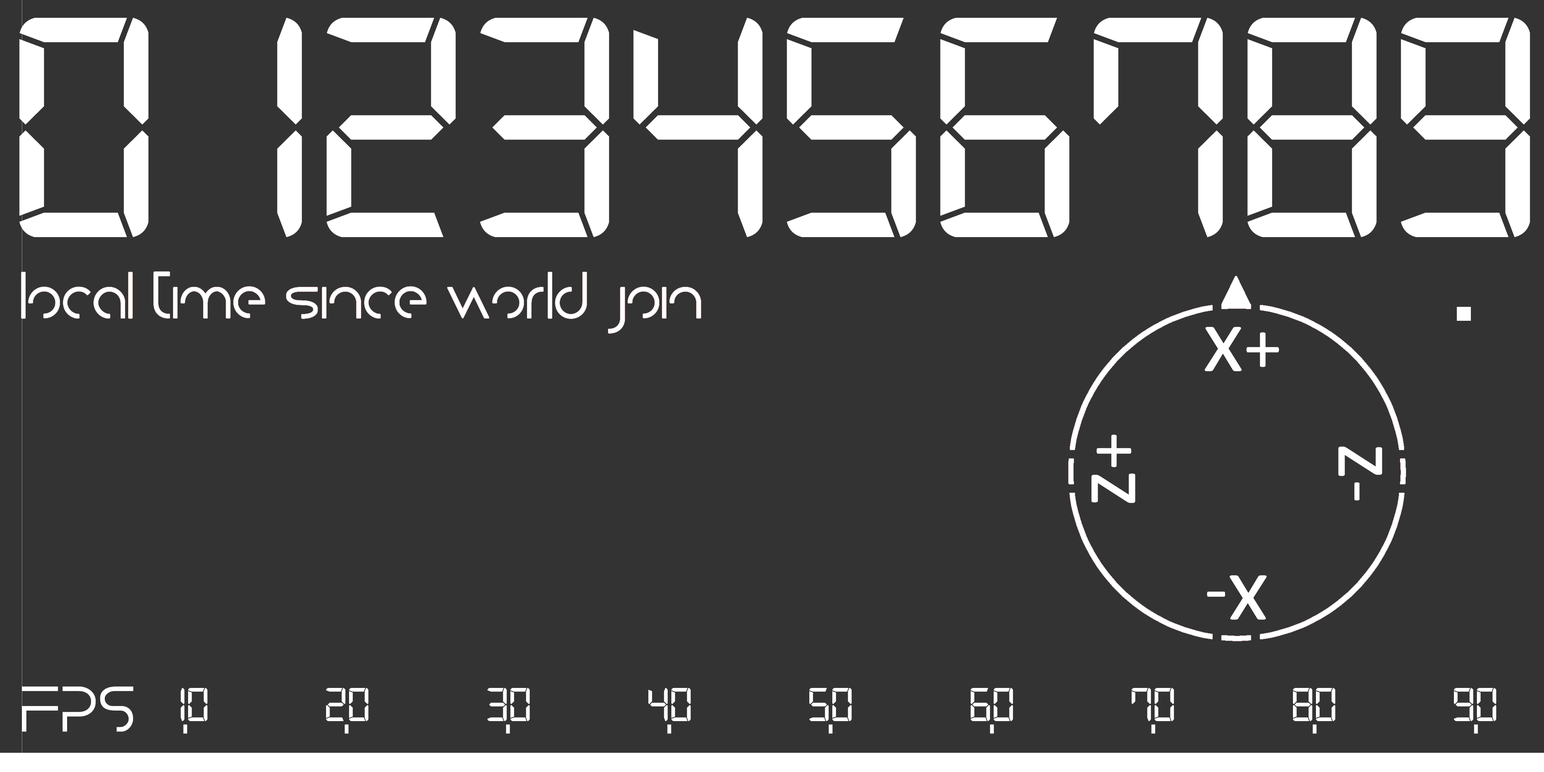
<style>
.page{position:relative;width:1544px;height:772px;background:#333333}
.page>*{position:absolute;margin:0}
.t1{font:335.1px "Digital-7Mono";color:#ffffff}
.t2{font:60.3px "Dissolvelight";color:#ffffff}
.t3{font:191.7px "Digital-7Mono";color:#ffffff}
.t4{font:94.3px "Calibri";color:#ffffff}
.t5{font:75.4px "Calibri";color:#ffffff}
.t6{font:60.3px "DissolveRegular";color:#ffffff}
.t7{font:50.6px "Digital-7Mono";color:#ffffff}
</style>
<div class="page">
<p class="t1" style="left:19px;top:18px;width:1511px;height:219px">0123456789</p>
<p class="t2" style="left:22px;top:272px;width:679px;height:61px">local time since world join</p>
<p class="t3" style="left:1457px;top:307px;width:14px;height:14px">.</p>
<p class="t4" style="left:1205px;top:327px;width:74px;height:44px">x<span class="t5">+</span></p>
<p class="t4" style="left:1091px;top:435px;width:45px;height:68px;rotate:-90deg">z<span class="t5">+</span></p>
<p class="t4" style="left:1338px;top:446px;width:45px;height:55px;rotate:90deg">z<span class="t5">-</span></p>
<p class="t4" style="left:1207px;top:575px;width:60px;height:45px;rotate:180deg">x<span class="t5">-</span></p>
<p class="t6" style="left:22px;top:687px;width:111px;height:45px">FPS</p>
<p class="t7" style="left:181px;top:688px;width:1316px;height:34px">10     20     30     40     50     60     70     80     90</p>
</div>
